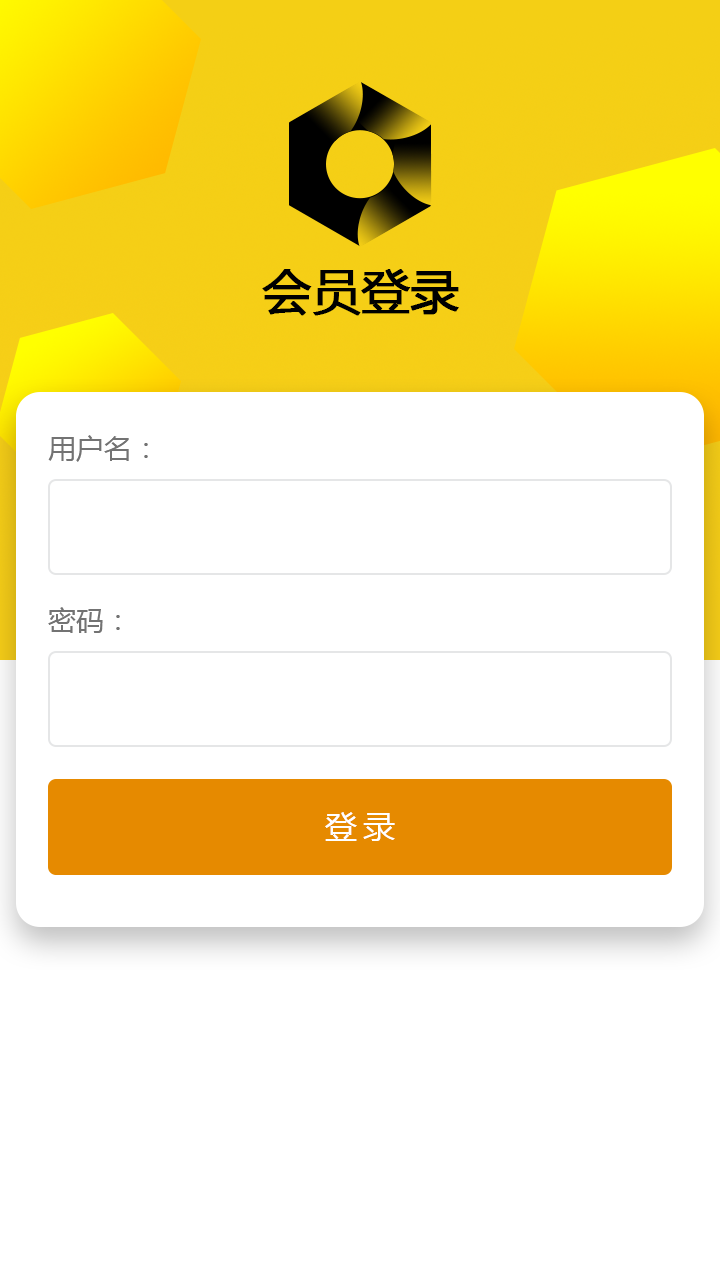
<style>
.page{position:relative;width:720px;height:1280px;background:#ffffff}
.page>*{position:absolute;margin:0}
.t1{font:48px "MicrosoftYaHei";color:#000000;font-weight:bold}
.t2{font:28px "MicrosoftYaHei";color:#737373}
.t3{font:32px "MicrosoftYaHei";letter-spacing:0.2em;color:#ffffff}
</style>
<div class="page">
<p class="t1" style="left:262px;top:269px;width:197px;height:47px">会员登录</p>
<p class="t2" style="left:48px;top:435px;width:100px;height:27px">用户名：</p>
<p class="t2" style="left:48px;top:607px;width:72px;height:26px">密码：</p>
<p class="t3" style="left:325px;top:812px;width:70px;height:29px">登录</p>
</div>
